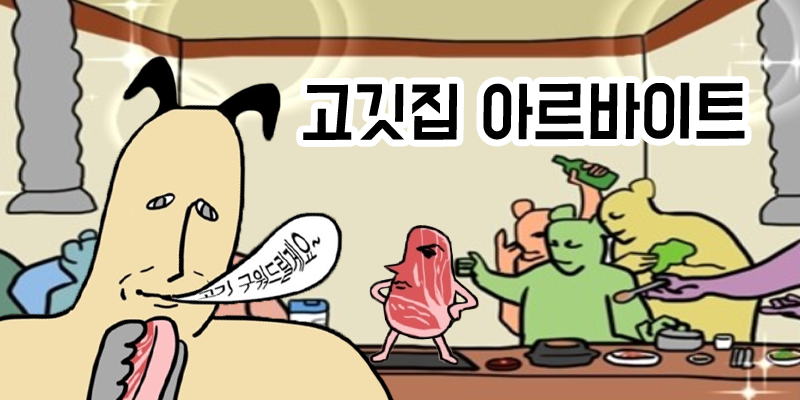
<style>
.page{position:relative;width:800px;height:400px}
.page>*{position:absolute;margin:0}
.t1{font:59px "BMDoHyeon";color:#000000;scale:0.95 1}
</style>
<div class="page">
<p class="t1" style="left:303px;top:82px;width:442px;height:58px">고깃집 아르바이트</p>
</div>
